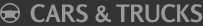
<style>
.page{position:relative;width:203px;height:26px;background:#333333}
.page>*{position:absolute;margin:0}
.t1{font:24px "Rosario-Bold";color:#9a9a9a;text-transform:uppercase}
</style>
<div class="page">
<p class="t1" style="left:30px;top:4px;width:173px;height:19px">CARS &amp; TRUCKS</p>
</div>
